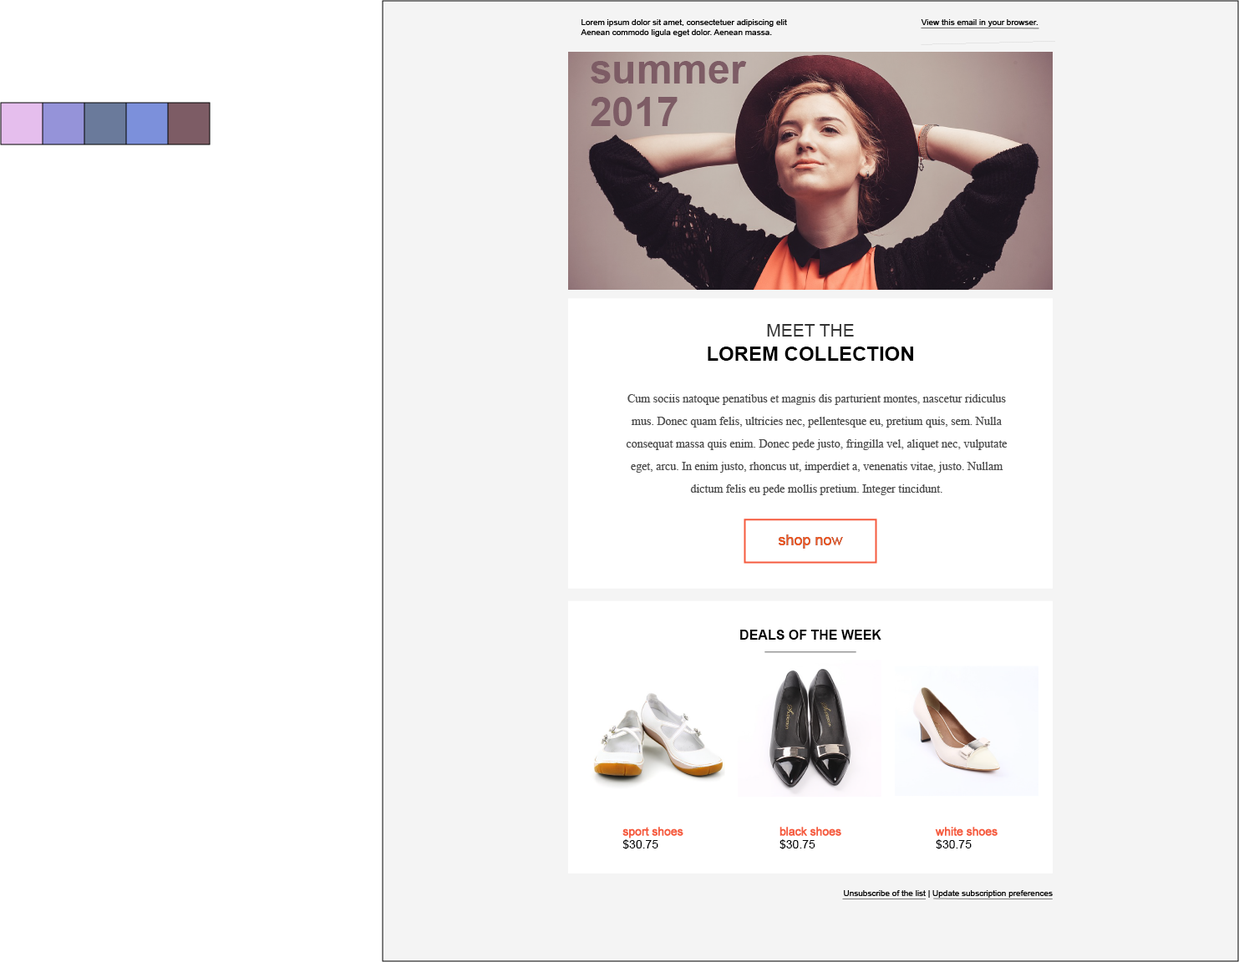
<style>
.page{position:relative;width:1239px;height:962px;background:#ffffff}
.page>*{position:absolute;margin:0}
.t1{font:8.4px "ArialMT";color:#000000}
.t2{font:10px "MyriadPro-Regular";color:#000000}
.t3{font:40.1px/42.6px "Arial-BoldMT";color:#7d5c65}
.t4{font:17.5px "ArialMT";color:#333333}
.t5{font:20.1px "Arial-BoldMT";color:#000000}
.t6{font:11.7px/22.6px "MyriadPro-Regular";color:#4d4d4d}
.t7{font:15px "ArialMT";color:#f15a24}
.t8{font:13.4px "Arial-BoldMT";color:#000000}
.t9{font:11.7px "ArialMT";color:#000002}
</style>
<div class="page">
<p class="t1" style="left:581px;top:19px;width:206px;height:18px"><span class="t2"><br></span>Lorem ipsum dolor sit amet, consectetuer adipiscing elit<br>Aenean commodo ligula eget dolor. Aenean massa.</p>
<p class="t1" style="left:921px;top:19px;width:117px;height:8px"><span class="t2"><br></span>View this email in your browser.</p>
<p class="t3" style="left:591px;top:61px;width:156px;height:65px">summer <br>2017</p>
<p class="t4" style="left:767px;top:324px;width:87px;height:13px">MEET THE</p>
<p class="t5" style="left:708px;top:347px;width:205px;height:14px">LOREM COLLECTION</p>
<p class="t6" style="left:626px;top:394px;width:382px;height:101px;text-align:center">Cum sociis natoque penatibus et magnis dis parturient montes, nascetur ridiculus mus. Donec quam felis, ultricies nec, pellentesque eu, pretium quis, sem. Nulla consequat massa quis enim. Donec pede justo, fringilla vel, aliquet nec, vulputate eget, arcu. In enim justo, rhoncus ut, imperdiet a, venenatis vitae, justo. Nullam dictum felis eu pede mollis pretium. Integer tincidunt.</p>
<p class="t7" style="left:779px;top:535px;width:64px;height:14px">shop now</p>
<p class="t7" style="left:779px;top:535px;width:64px;height:14px">shop now</p>
<p class="t8" style="left:740px;top:630px;width:141px;height:10px">DEALS OF THE WEEK</p>
<p class="t9" style="left:622px;top:840px;width:36px;height:10px">$30.75</p>
<p class="t9" style="left:779px;top:840px;width:36px;height:10px">$30.75</p>
<p class="t9" style="left:936px;top:840px;width:36px;height:10px">$30.75</p>
<p class="t1" style="left:844px;top:891px;width:209px;height:7px"><span class="t2"><br></span>Unsubscribe of the list | Update subscription preferences</p>
</div>
